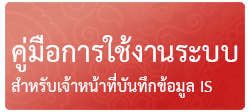
<style>
.page{position:relative;width:250px;height:112px}
.page>*{position:absolute;margin:0}
.t1{font:40.6px "THSarabunPSK-Bold";color:#ffffff}
.t2{font:23.6px "THSarabunPSK-Bold";color:#ffffff}
</style>
<div class="page">
<p class="t1" style="left:12px;top:35px;width:226px;height:37px">คู่มือการใช้งานระบบ</p>
<p class="t2" style="left:11px;top:73px;width:201px;height:25px">สำหรับเจ้าหน้าที่บันทึกข้อมูล IS</p>
</div>
